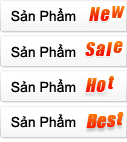
<style>
.page{position:relative;width:127px;height:142px;background:#ffffff}
.page>*{position:absolute;margin:0}
.t1{font:14px "ArialMT";color:#000000}
</style>
<div class="page">
<p class="t1" style="left:11px;top:8px;width:65px;height:14px">Sản Phẩm</p>
<p class="t1" style="left:11px;top:44px;width:65px;height:14px">Sản Phẩm</p>
<p class="t1" style="left:11px;top:79px;width:65px;height:14px">Sản Phẩm</p>
<p class="t1" style="left:11px;top:114px;width:65px;height:14px">Sản Phẩm</p>
</div>
